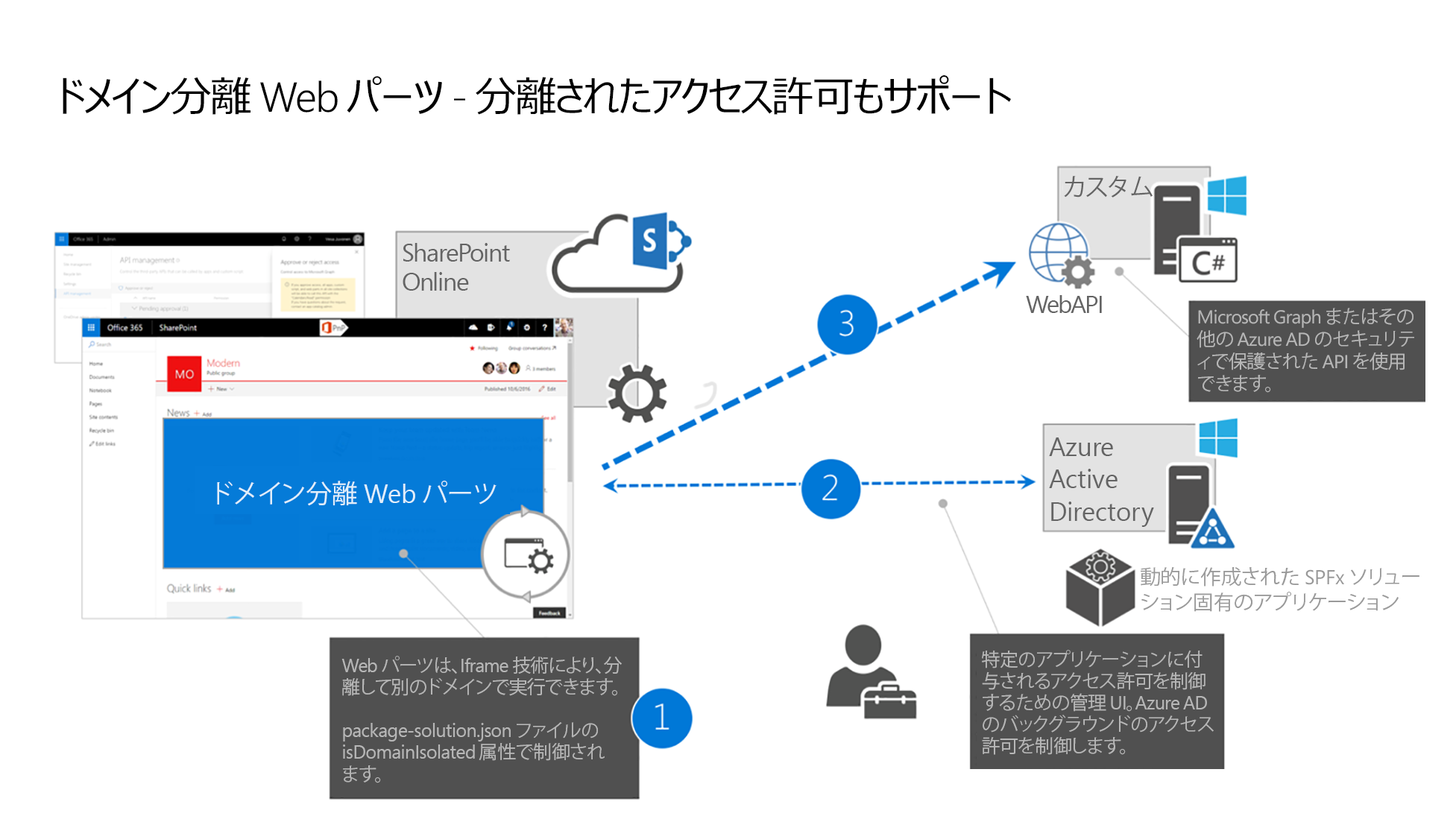
<style>
.page{position:relative;width:1456px;height:819px;background:#ffffff}
.page>*{position:absolute;margin:0}
.t1{font:41.9px "MeiryoUI";letter-spacing:-0.034em;color:#000000}
.t2{font:41.9px "SegoePro-SemiLight";letter-spacing:-0.034em;color:#000000}
.t3{font:41.9px "SegoePro-Light";letter-spacing:-0.034em;color:#000000}
.t4{font:24.5px "KozGoPr6N-Regular";letter-spacing:-0.02em;color:#646464}
.t5{font:25px/29.5px "SegoePro";letter-spacing:-0.044em;color:#646464}
.t6{font:24.8px "SegoePro";letter-spacing:-0.064em;color:#646464}
.t7{font:18.6px "SegoePro";letter-spacing:-0.03em;color:#b7b7b7}
.t8{font:18.6px "KozGoPr6N-Regular";letter-spacing:-0.03em;color:#b7b7b7}
.t9{font:26.1px/32.6px "SegoePro";letter-spacing:-0.01em;color:#646464}
.t10{font:25.9px "KozGoPr6N-Regular";color:#e1effa}
.t11{font:25.9px "SegoePro";color:#e1effa}
.t12{font:20.2px/24.8px "KozGoPr6N-Regular";letter-spacing:-0.01em;color:#999999}
.t13{font:20.2px/24.8px "SegoePro";letter-spacing:-0.01em;color:#999999}
.t14{font:18.6px/21.7px "KozGoPr6N-Regular";letter-spacing:-0.03em;color:#b7b7b7}
.t15{font:18.6px/21.7px "SegoePro";letter-spacing:-0.03em;color:#b7b7b7}
</style>
<div class="page">
<p class="t1" style="left:63px;top:75px;width:948px;height:40px">ドメイン分離 <span class="t2">Web </span>パーツ<span class="t3"> - </span>分離されたアクセス許可もサポート</p>
<p class="t4" style="left:1064px;top:176px;width:88px;height:22px">カスタム</p>
<p class="t5" style="left:402px;top:243px;width:108px;height:48px">SharePoint Online</p>
<p class="t6" style="left:1026px;top:295px;width:76px;height:18px">WebAPI</p>
<p class="t7" style="left:1196px;top:308px;width:218px;height:85px">Microsoft Graph <span class="t8">またはその他の</span> Azure AD <span class="t8">のセキュリティで保護された</span> API <span class="t8">を使用できます。</span></p>
<p class="t9" style="left:1049px;top:438px;width:105px;height:89px">Azure Active Directory</p>
<p class="t10" style="left:217px;top:481px;width:279px;height:25px">ドメイン分離<span class="t11"> Web </span>パーツ</p>
<p class="t12" style="left:1140px;top:567px;width:279px;height:45px">動的に作成された<span class="t13"> SPFx </span>ソリューション固有のアプリケーション</p>
<p class="t14" style="left:982px;top:650px;width:231px;height:105px">特定のアプリケーションに付与されるアクセス許可を制御するための管理<span class="t15"> UI</span>。<span class="t15">Azure AD </span>のバックグラウンドのアクセス許可を制御します。</p>
<p class="t14" style="left:341px;top:656px;width:281px;height:127px"><span class="t15">Web </span>パーツは、<span class="t15">Iframe </span>技術により、分離して別のドメインで実行できます。<span class="t15"><br><br>package-solution.json </span>ファイルの<span class="t15"> isDomainIsolated </span>属性で制御され<br>ます。</p>
</div>
